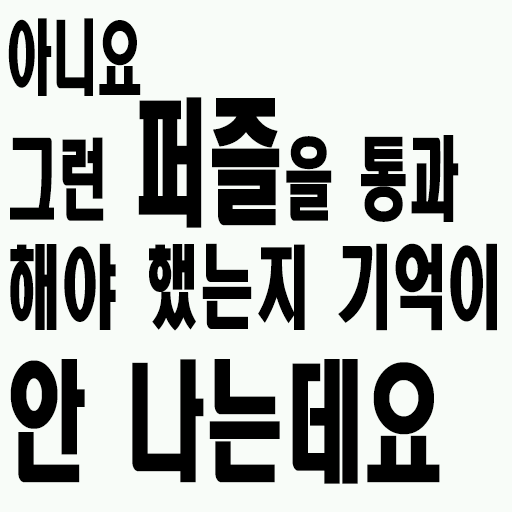
<style>
.page{position:relative;width:512px;height:512px;background:#f8fcf8}
.page>*{position:absolute;margin:0}
.t1{font:81px "HeadlineR-HM";color:#000000;scale:0.56 1}
.t2{font:90px "HeadlineR-HM";color:#000000;scale:0.56 1}
.t3{font:136.8px "HeadlineR-HM";color:#000000;scale:0.56 1}
.t4{font:90px/130px "HeadlineR-HM";color:#000000;scale:0.61 1}
.t5{font:90px/130px "HeadlineR-HM";color:#000000;scale:0.56 1}
.t6{font:129.6px/130px "HeadlineR-HM";color:#000000;scale:0.61 1}
</style>
<div class="page">
<p class="t1" style="left:8px;top:18px;width:133px;height:78px">아니요</p>
<p class="t2" style="left:10px;top:97px;width:449px;height:131px">그런 <span class="t3">퍼즐</span>을 통과</p>
<p class="t4" style="left:10px;top:243px;width:487px;height:241px"><span class="t5"><br></span>해야 했는지 기억이 <br><span class="t6">안 나는데요</span></p>
</div>
